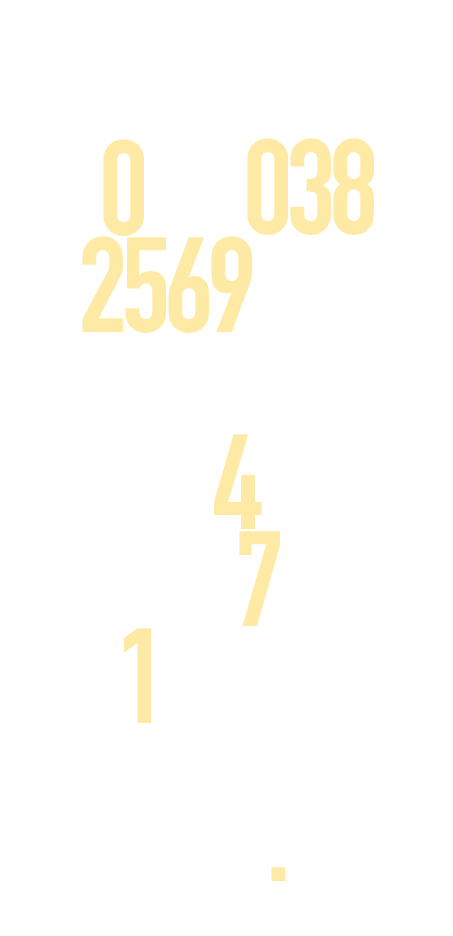
<style>
.page{position:relative;width:453px;height:936px;background:#ffffff}
.page>*{position:absolute;margin:0}
.t1{font:133px "DINCondensed-Bold";letter-spacing:-0.05em;color:#ffeaa5}
.t2{font:133px "DINCondensed-Bold";letter-spacing:-0.025em;color:#ffeaa5}
</style>
<div class="page">
<p class="t1" style="left:103px;top:139px;width:41px;height:97px">0</p>
<p class="t1" style="left:247px;top:138px;width:127px;height:97px">038</p>
<p class="t1" style="left:82px;top:236px;width:170px;height:97px">2569</p>
<p class="t1" style="left:214px;top:434px;width:48px;height:95px">4</p>
<p class="t1" style="left:239px;top:531px;width:41px;height:95px">7</p>
<p class="t2" style="left:124px;top:628px;width:28px;height:95px">1</p>
<p class="t1" style="left:271px;top:867px;width:15px;height:14px">.</p>
</div>
